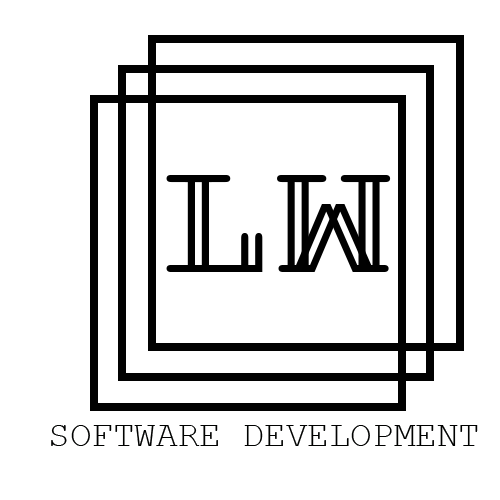
<style>
.page{position:relative;width:500px;height:500px;background:#ffffff}
.page>*{position:absolute;margin:0}
.t1{font:170px "CourierNewPSMT";color:#000000}
.t2{font:170px "CourierNewPSMT";color:#010101}
.t3{font:36px "CourierNewPSMT";color:#000100}
</style>
<div class="page">
<p class="t1" style="left:166px;top:175px;width:83px;height:97px">L</p>
<p class="t1" style="left:180px;top:175px;width:83px;height:97px">L</p>
<p class="t2" style="left:277px;top:175px;width:100px;height:97px;rotate:180deg">M</p>
<p class="t1" style="left:291px;top:175px;width:100px;height:97px;rotate:180deg">M</p>
<p class="t3" style="left:51px;top:425px;width:427px;height:21px">SOFTWARE DEVELOPMENT</p>
</div>
